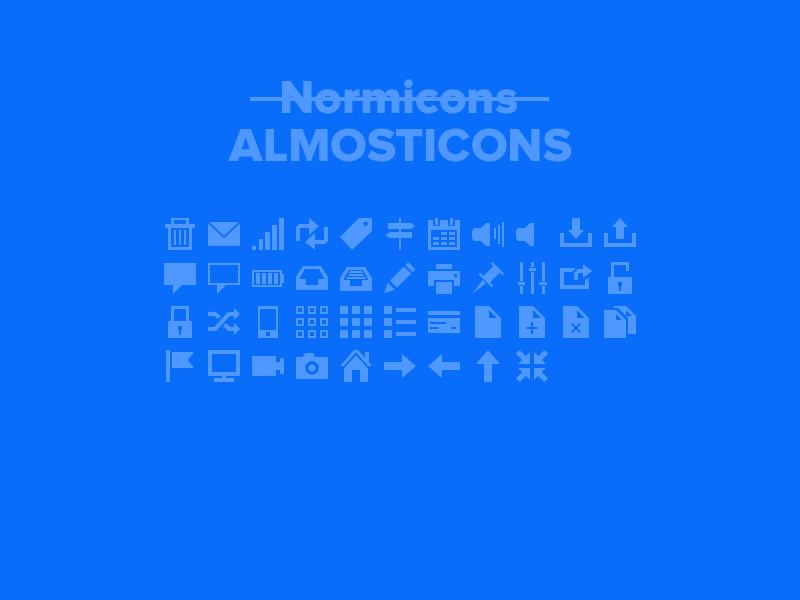
<style>
.page{position:relative;width:800px;height:600px;background:#0a6df9}
.page>*{position:absolute;margin:0}
.t1{font:48px "ProximaNova-Extrabld";color:#4e98ff}
</style>
<div class="page">
<p class="t1" style="left:282px;top:79px;width:235px;height:35px">Normicons</p>
<p class="t1" style="left:228px;top:128px;width:344px;height:34px">ALMOSTICONS</p>
</div>
